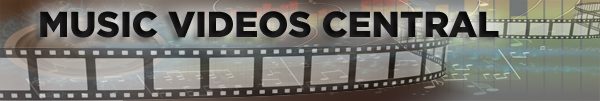
<style>
.page{position:relative;width:600px;height:101px}
.page>*{position:absolute;margin:0}
.t1{font:36px "FluidTitleCaps";color:#000000}
</style>
<div class="page">
<p class="t1" style="left:40px;top:11px;width:459px;height:27px">Music Videos central</p>
</div>
